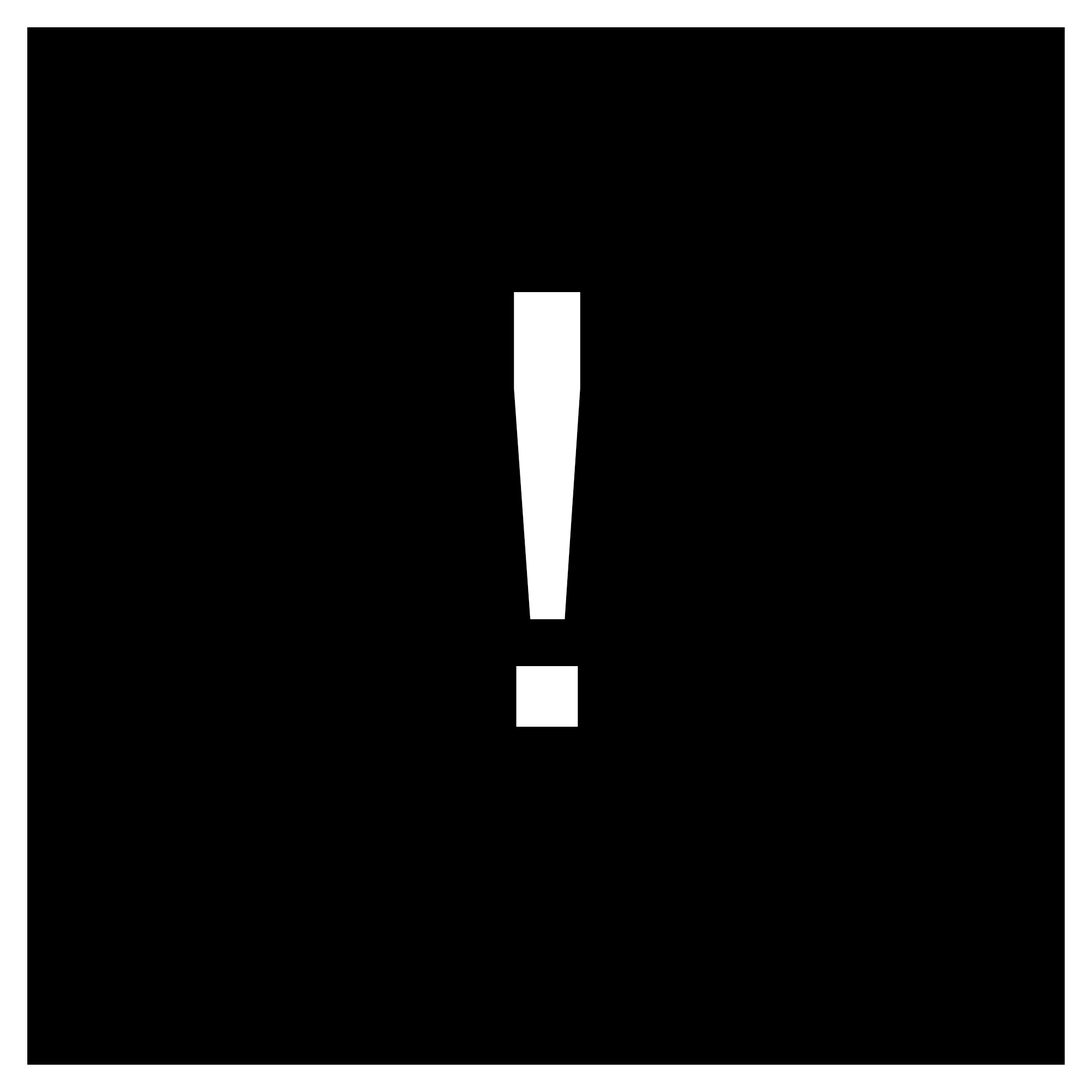
<style>
.page{position:relative;width:1092px;height:1092px;background:#000000}
.page>*{position:absolute;margin:0}
.t1{font:606.7px "ArialMT";color:#ffffff}
</style>
<div class="page">
<p class="t1" style="left:514px;top:292px;width:66px;height:435px">!</p>
</div>
